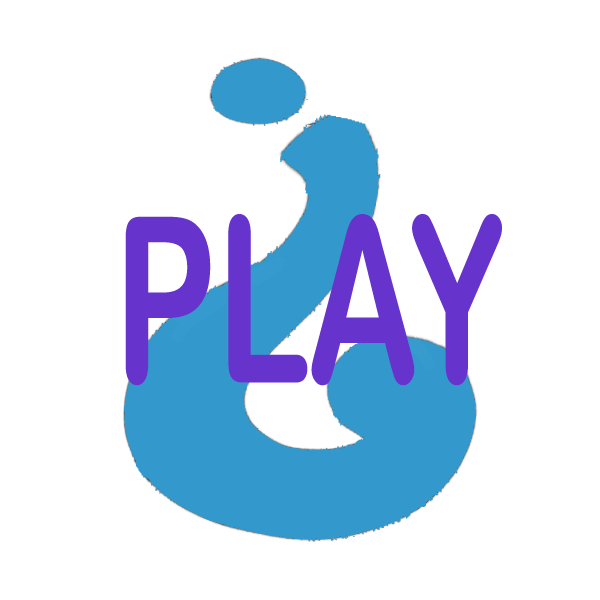
<style>
.page{position:relative;width:600px;height:600px;background:#ffffff}
.page>*{position:absolute;margin:0}
.t1{font:231.3px "ArialRoundedMTBold";color:#6633cc;scale:0.67 1}
</style>
<div class="page">
<p class="t1" style="left:125px;top:214px;width:377px;height:172px">PLAY</p>
</div>
